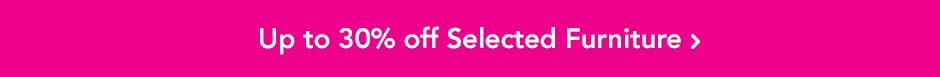
<style>
.page{position:relative;width:940px;height:77px;background:#ec008c}
.page>*{position:absolute;margin:0}
.t1{font:27.8px "AvenirLT-Heavy";letter-spacing:-0.01em;color:#ffffff}
</style>
<div class="page">
<p class="t1" style="left:260px;top:26px;width:421px;height:29px">Up to 30% off Selected Furniture</p>
</div>
